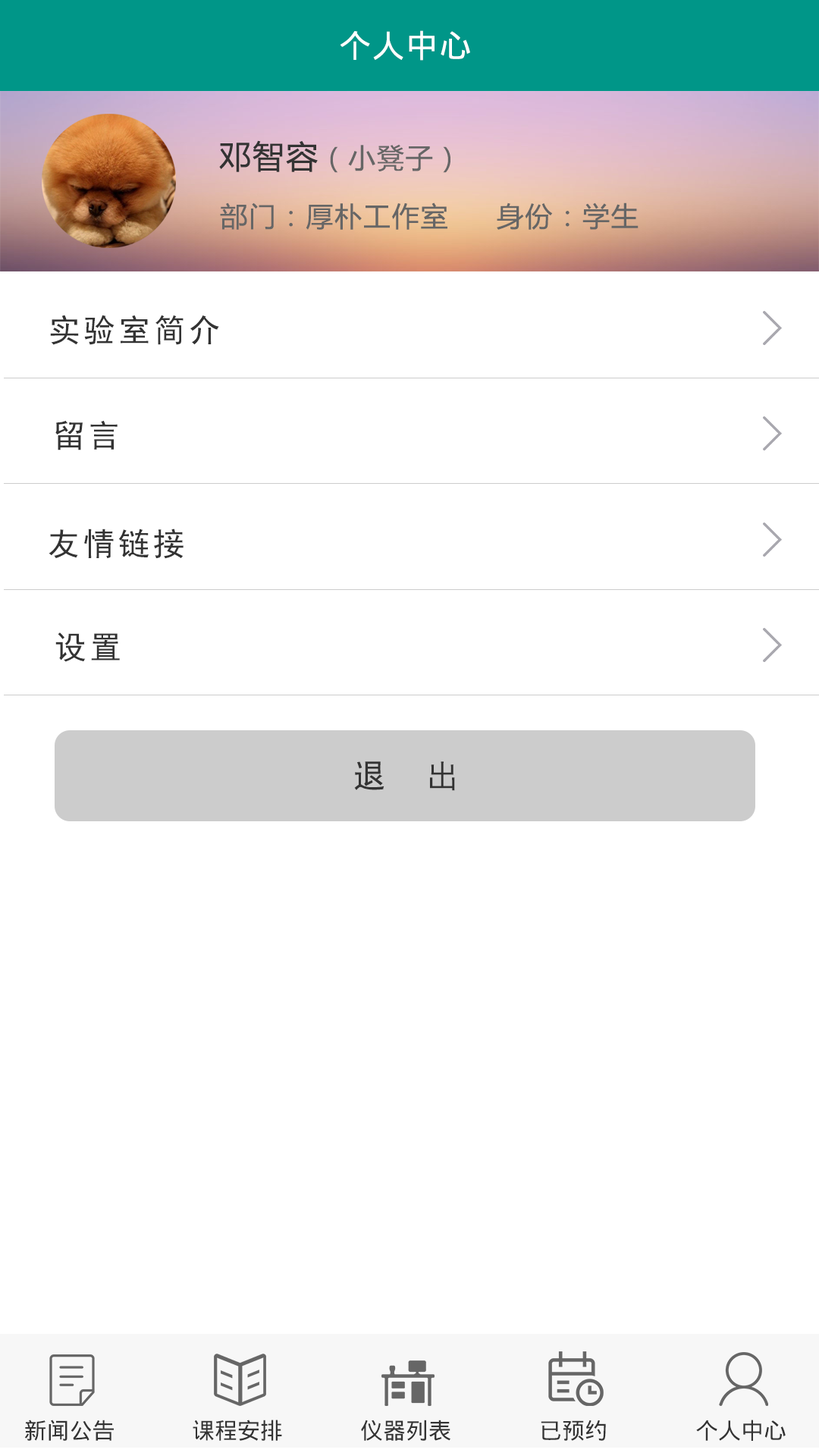
<style>
.page{position:relative;width:819px;height:1456px;background:#ffffff}
.page>*{position:absolute;margin:0}
.t1{font:31.8px "DroidSansFallback";letter-spacing:0.05em;color:#ffffff}
.t2{font:27.3px "MicrosoftYaHei";letter-spacing:0.05em;color:#666666}
.t3{font:31.8px "MicrosoftYaHei";letter-spacing:0.05em;color:#333333}
.t4{font:31.8px "SimHei";letter-spacing:0.1em;color:#333333}
.t5{font:22.7px "DroidSansFallback";color:#333333}
</style>
<div class="page">
<p class="t1" style="left:340px;top:30px;width:130px;height:31px">个人中心</p>
<p class="t2" style="left:219px;top:140px;width:231px;height:33px"><span class="t3">邓智容</span>（小凳子）</p>
<p class="t2" style="left:220px;top:202px;width:419px;height:28px">部门：厚朴工作室     身份：学生</p>
<p class="t4" style="left:50px;top:315px;width:169px;height:30px">实验室简介</p>
<p class="t4" style="left:55px;top:420px;width:63px;height:30px">留言</p>
<p class="t4" style="left:49px;top:529px;width:135px;height:30px">友情链接</p>
<p class="t4" style="left:55px;top:632px;width:65px;height:30px">设置</p>
<p class="t4" style="left:354px;top:761px;width:101px;height:30px">退  出</p>
<p class="t5" style="left:24px;top:1420px;width:90px;height:21px">新闻公告</p>
<p class="t5" style="left:193px;top:1420px;width:89px;height:21px">课程安排</p>
<p class="t5" style="left:361px;top:1420px;width:89px;height:21px">仪器列表</p>
<p class="t5" style="left:541px;top:1420px;width:65px;height:21px">已预约</p>
<p class="t5" style="left:696px;top:1420px;width:90px;height:21px">个人中心</p>
</div>
